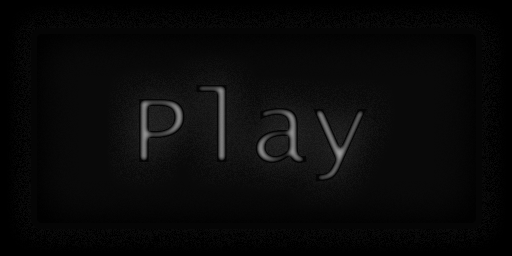
<style>
.page{position:relative;width:512px;height:256px}
.page>*{position:absolute;margin:0}
.t1{font:100px "LucidaConsole"}
</style>
<div class="page">
<p class="t1" style="left:139px;top:85px;width:228px;height:96px">Play</p>
</div>
